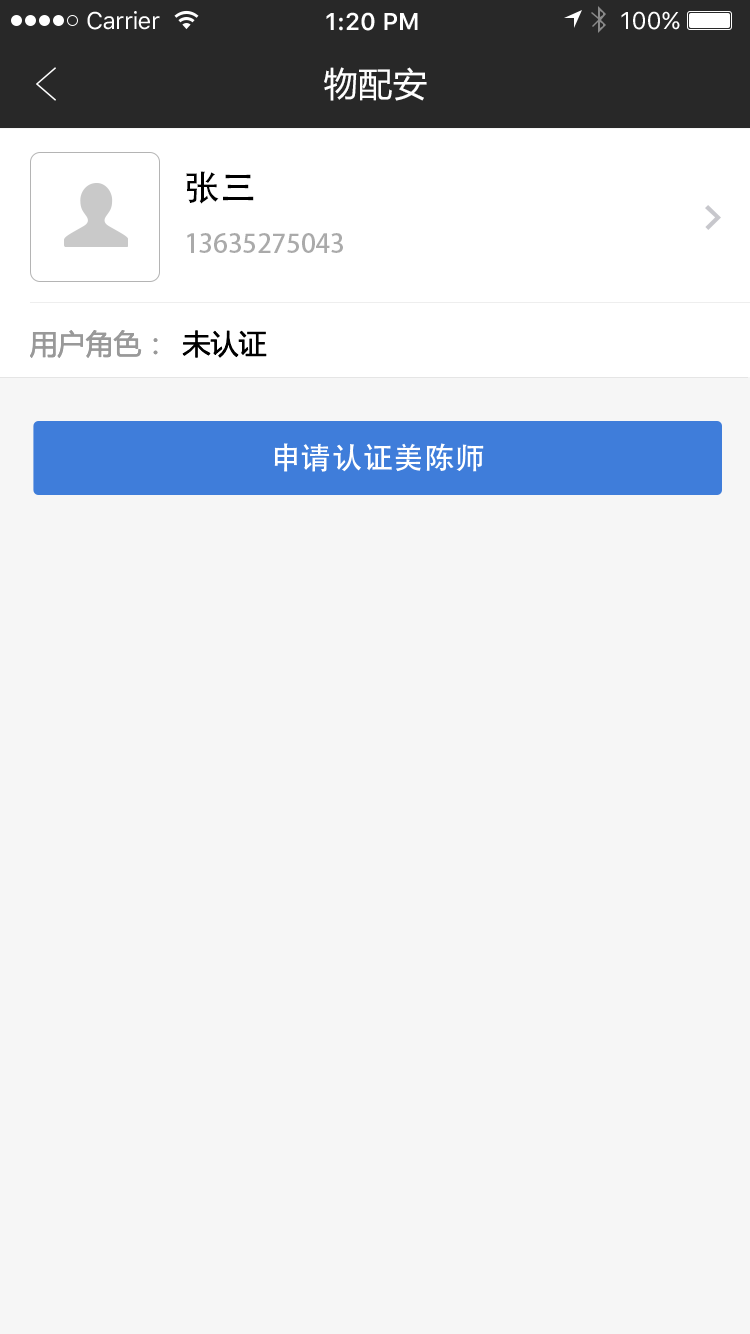
<style>
.page{position:relative;width:750px;height:1334px;background:#f6f6f6}
.page>*{position:absolute;margin:0}
.t1{font:24px "SFUIText-Regular";letter-spacing:-0.025em;color:#ffffff}
.t2{font:24px "SFUIText-Semibold";color:#ffffff}
.t3{font:24px "SFUIText-Regular";color:#ffffff}
.t4{font:34px "MicrosoftYaHei";letter-spacing:0.02em;color:#ffffff}
.t5{font:36px "AdobeHeitiStd-Regular";color:#000000}
.t6{font:26px "AdobeHeitiStd-Regular";color:#aaaaaa}
.t7{font:28px "MicrosoftYaHei";color:#999999}
.t8{font:28px "MicrosoftYaHei";color:#000000}
.t9{font:30px "AdobeHeitiStd-Regular";letter-spacing:0.02em;color:#ffffff}
</style>
<div class="page">
<p class="t1" style="left:87px;top:11px;width:73px;height:19px">Carrier</p>
<p class="t2" style="left:326px;top:12px;width:92px;height:19px">1:20 PM</p>
<p class="t3" style="left:621px;top:11px;width:59px;height:19px">100%</p>
<p class="t4" style="left:324px;top:67px;width:103px;height:34px">物配安</p>
<p class="t5" style="left:186px;top:171px;width:68px;height:33px">张三</p>
<p class="t6" style="left:187px;top:233px;width:156px;height:20px">13635275043</p>
<p class="t7" style="left:30px;top:330px;width:128px;height:28px">用户角色：</p>
<p class="t8" style="left:182px;top:330px;width:85px;height:28px">未认证</p>
<p class="t9" style="left:274px;top:443px;width:210px;height:29px">申请认证美陈师</p>
</div>
